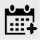
<style>
.page{position:relative;width:40px;height:40px;background:#eaeaea}
.page>*{position:absolute;margin:0}
.t1{font:15px "HUTalnemogulim140";letter-spacing:0.01em;color:#0c0c0c}
</style>
<div class="page">
<p class="t1" style="left:27px;top:23px;width:10px;height:11px">+</p>
</div>
